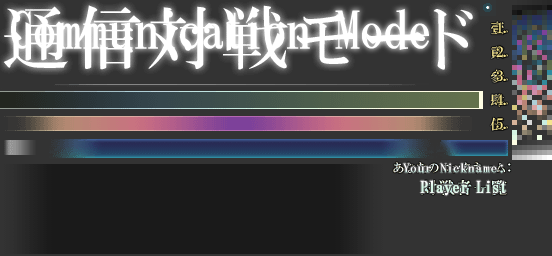
<style>
.page{position:relative;width:552px;height:256px;background:#333333}
.page>*{position:absolute;margin:0}
.t1{font:52px "HGMinchoB";letter-spacing:-0.025em;color:#ffffff}
.t2{font:14px/24px "HGMinchoB";letter-spacing:-0.025em;color:#f6e690}
.t3{font:12px "HGMinchoB";letter-spacing:0.025em;color:#ffffff;scale:1.2 1}
.t4{font:12px "HGMinchoB";letter-spacing:-0.025em;color:#ffffff;scale:1.2 1}
.t5{font:12px "HGMinchoB";letter-spacing:-0.05em;color:#ffffff;scale:1.2 1}
.t6{font:12px "HGMinchoB";letter-spacing:-0.075em;color:#ffffff;scale:1.2 1}
.t7{font:16px "HGMinchoB";letter-spacing:-0.025em;color:#d8f6e7;font-weight:bold}
.t8{font:16px "HGMinchoB";letter-spacing:-0.075em;color:#d8f6e7;font-weight:bold}
.t9{font:16px "HGMinchoB";letter-spacing:-0.05em;color:#d8f6e7;font-weight:bold}
</style>
<div class="page">
<p class="t1" style="left:11px;top:8px;width:418px;height:42px">Communication Mode</p>
<p class="t2" style="left:496px;top:22px;width:10px;height:107px;text-align:right">1.<br>2.<br>3.<br>4.<br>5.</p>
<p class="t3" style="left:403px;top:163px;width:100px;height:10px"><span class="t4">Y</span>our <span class="t5">N</span><span class="t6">i</span>ckname:</p>
<p class="t7" style="left:420px;top:180px;width:86px;height:16px">Player L<span class="t8">i</span><span class="t9">s</span>t</p>
</div>
